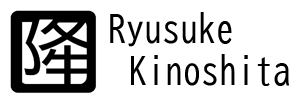
<style>
.page{position:relative;width:300px;height:100px;background:#ffffff}
.page>*{position:absolute;margin:0}
.t1{font:36px "BIZ-UDGothic";color:#000000}
</style>
<div class="page">
<p class="t1" style="left:110px;top:12px;width:122px;height:35px">Ryusuke</p>
<p class="t1" style="left:131px;top:54px;width:159px;height:32px">Kinoshita</p>
</div>
